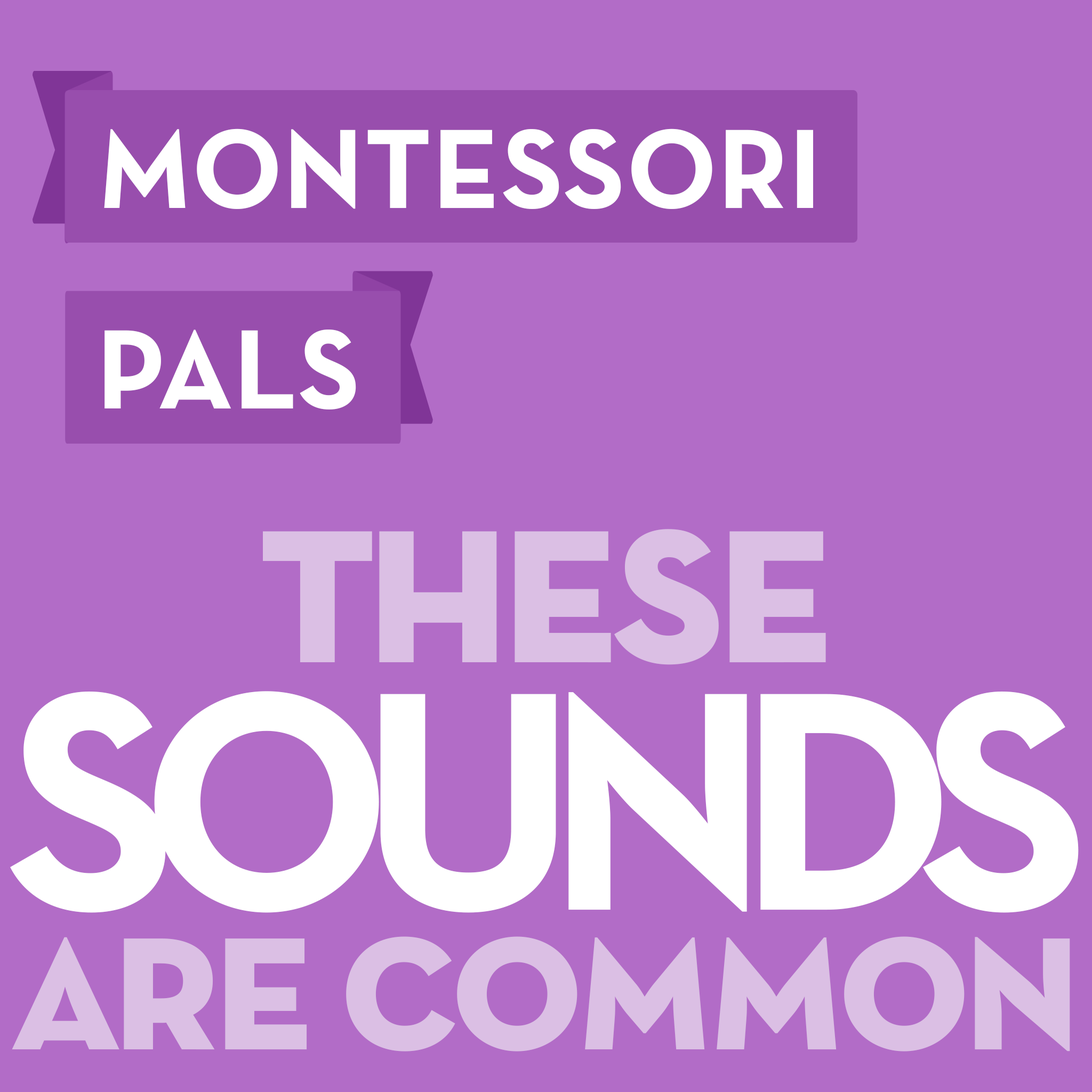
<style>
.page{position:relative;width:1092px;height:1092px;background:#b26cc7}
.page>*{position:absolute;margin:0}
.t1{font:114.6px "NeutraTextTF-BoldSCAlt";letter-spacing:0.005em;color:#ffffff;text-transform:uppercase}
.t2{font:250.7px "NeutraTextTF-BoldSCAlt";letter-spacing:-0.05em;color:#dbbfe4}
.t3{font:317px "NeutraTextTF-BoldSCAlt";letter-spacing:-0.11em;color:#ffffff;text-transform:uppercase}
.t4{font:212.3px "NeutraTextTF-BoldSCAlt";letter-spacing:-0.05em;color:#dbbfe4}
</style>
<div class="page">
<p class="t1" style="left:104px;top:129px;width:709px;height:80px">Montessori</p>
<p class="t1" style="left:105px;top:330px;width:251px;height:79px">PALS</p>
<p class="t2" style="left:263px;top:529px;width:563px;height:136px">these</p>
<p class="t3" style="left:10px;top:691px;width:1069px;height:222px">Sounds</p>
<p class="t4" style="left:12px;top:936px;width:1058px;height:115px">are common</p>
</div>
